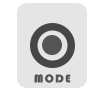
<style>
.page{position:relative;width:90px;height:90px;background:#e5e5e5}
.page>*{position:absolute;margin:0}
.t1{font:12px "Bauhaus93";letter-spacing:0.1em;color:#555555}
</style>
<div class="page">
<p class="t1" style="left:34px;top:74px;width:37px;height:9px">MODE</p>
</div>
